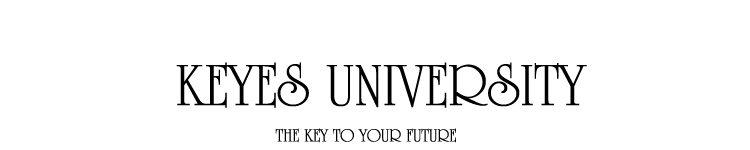
<style>
.page{position:relative;width:750px;height:150px;background:#ffffff}
.page>*{position:absolute;margin:0}
.t1{font:60px "Occidental";color:#000000}
.t2{font:18px "Occidental";color:#000000}
</style>
<div class="page">
<p class="t1" style="left:176px;top:62px;width:411px;height:46px">KEYES UNIVERSITY</p>
<p class="t2" style="left:275px;top:128px;width:181px;height:15px">THE KEY TO YOUR FUTURE</p>
</div>
